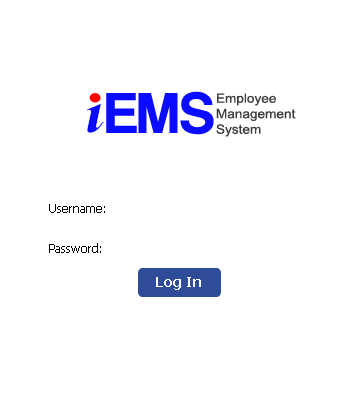
<style>
.page{position:relative;width:350px;height:400px;background:#ffffff}
.page>*{position:absolute;margin:0}
.t1{font:55.6px "Coolvetica";color:#0b0bff}
.t2{font:12.9px "ArialMT";color:#3d3d3d;scale:1.05 1}
.t3{font:12px "Tahoma";color:#000000}
.t4{font:14px "Tahoma-Bold";color:#ffffff}
</style>
<div class="page">
<p class="t1" style="left:106px;top:91px;width:108px;height:44px">EMS</p>
<p class="t2" style="left:216px;top:93px;width:80px;height:44px">Employee<br>Management<br>System</p>
<p class="t3" style="left:49px;top:204px;width:56px;height:9px">Username:</p>
<p class="t3" style="left:49px;top:243px;width:52px;height:10px">Password:</p>
<p class="t4" style="left:156px;top:277px;width:45px;height:13px">Log In</p>
</div>
